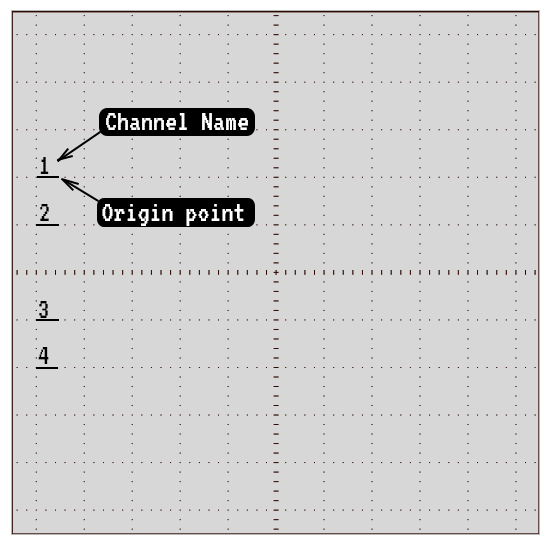
<style>
.page{position:relative;width:552px;height:548px;background:#d7d7d7}
.page>*{position:absolute;margin:0}
.t1{font:30px "VT323-Regular";color:#ffffff}
.t2{font:30px "VT323-Regular";color:#000000}
</style>
<div class="page">
<p class="t1" style="left:106px;top:113px;width:142px;height:17px">Channel Name</p>
<p class="t2" style="left:40px;top:157px;width:9px;height:17px">1</p>
<p class="t2" style="left:40px;top:204px;width:9px;height:17px">2</p>
<p class="t1" style="left:102px;top:204px;width:142px;height:22px">Origin point</p>
<p class="t2" style="left:39px;top:301px;width:9px;height:17px">3</p>
<p class="t2" style="left:38px;top:347px;width:11px;height:17px">4</p>
</div>
